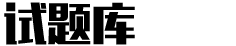
<style>
.page{position:relative;width:236px;height:46px;background:#ffffff}
.page>*{position:absolute;margin:0}
.t1{font:44px "MFLiHei_Noncommercial-Regular";color:#000000}
</style>
<div class="page">
<p class="t1" style="left:4px;top:2px;width:131px;height:43px">试题库</p>
</div>
